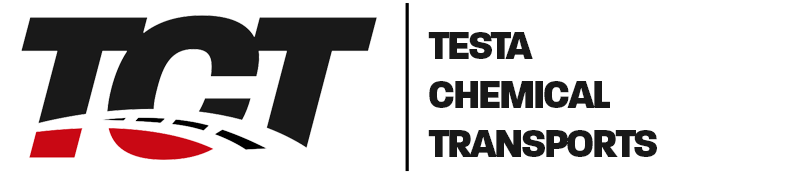
<style>
.page{position:relative;width:800px;height:174px;background:#ffffff}
.page>*{position:absolute;margin:0}
.t1{font:41px "Paralucent-Heavy";letter-spacing:-0.06em;color:#181818}
</style>
<div class="page">
<p class="t1" style="left:428px;top:32px;width:229px;height:125px">TESTA<br>CHEMICAL<br>TRANSPORTS</p>
</div>
